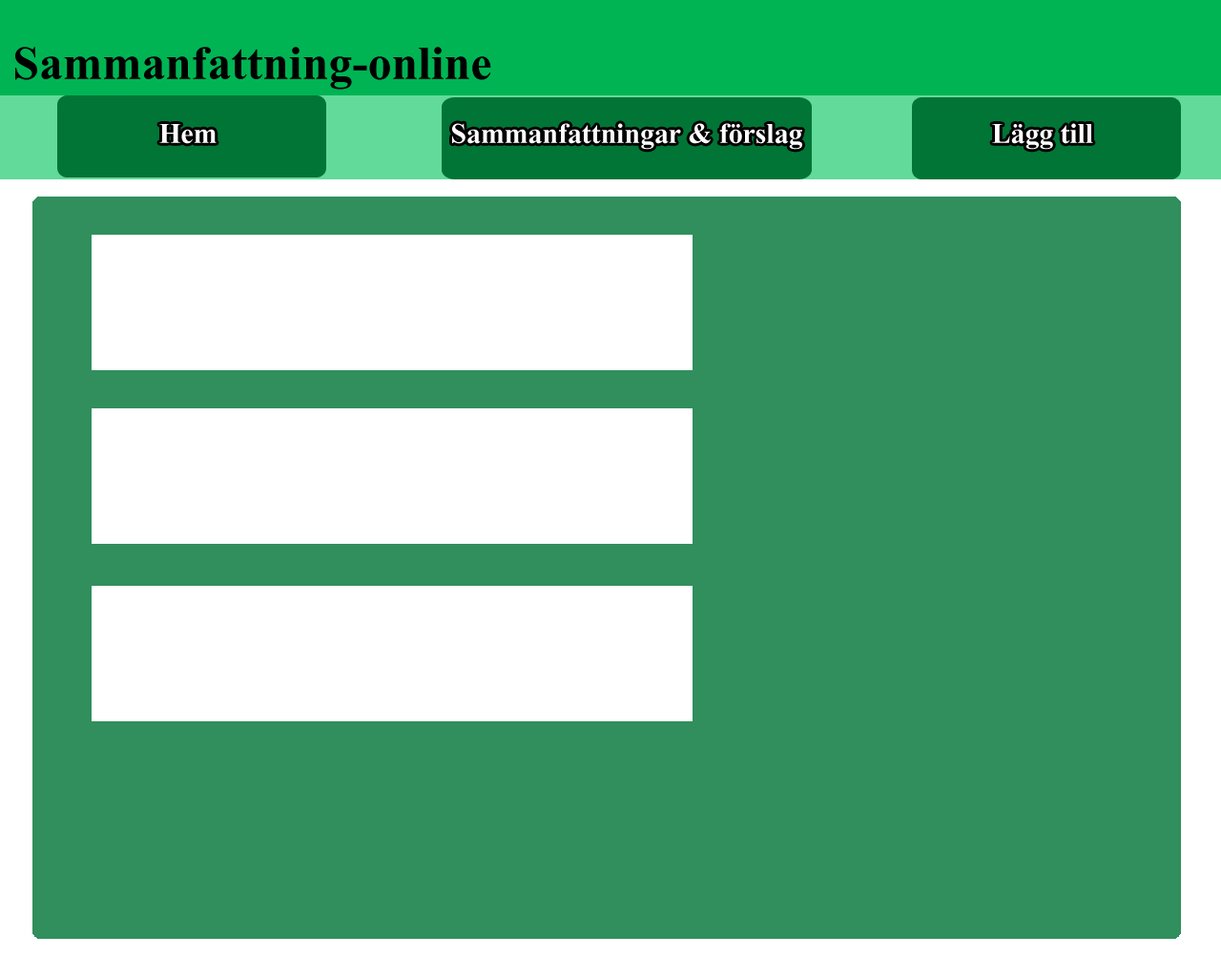
<style>
.page{position:relative;width:1221px;height:977px;background:#308f5c}
.page>*{position:absolute;margin:0}
.t1{font:57.2px "ShonarBangla-Bold";color:#000000}
.t2{font:34.3px "ShonarBangla-Bold";color:#ffffff}
</style>
<div class="page">
<p class="t1" style="left:15px;top:47px;width:476px;height:43px">Sammanfattning-online</p>
<p class="t2" style="left:159px;top:124px;width:58px;height:20px">Hem</p>
<p class="t2" style="left:452px;top:123px;width:350px;height:27px">Sammanfattningar &amp; förslag</p>
<p class="t2" style="left:992px;top:123px;width:101px;height:27px">Lägg till</p>
</div>
